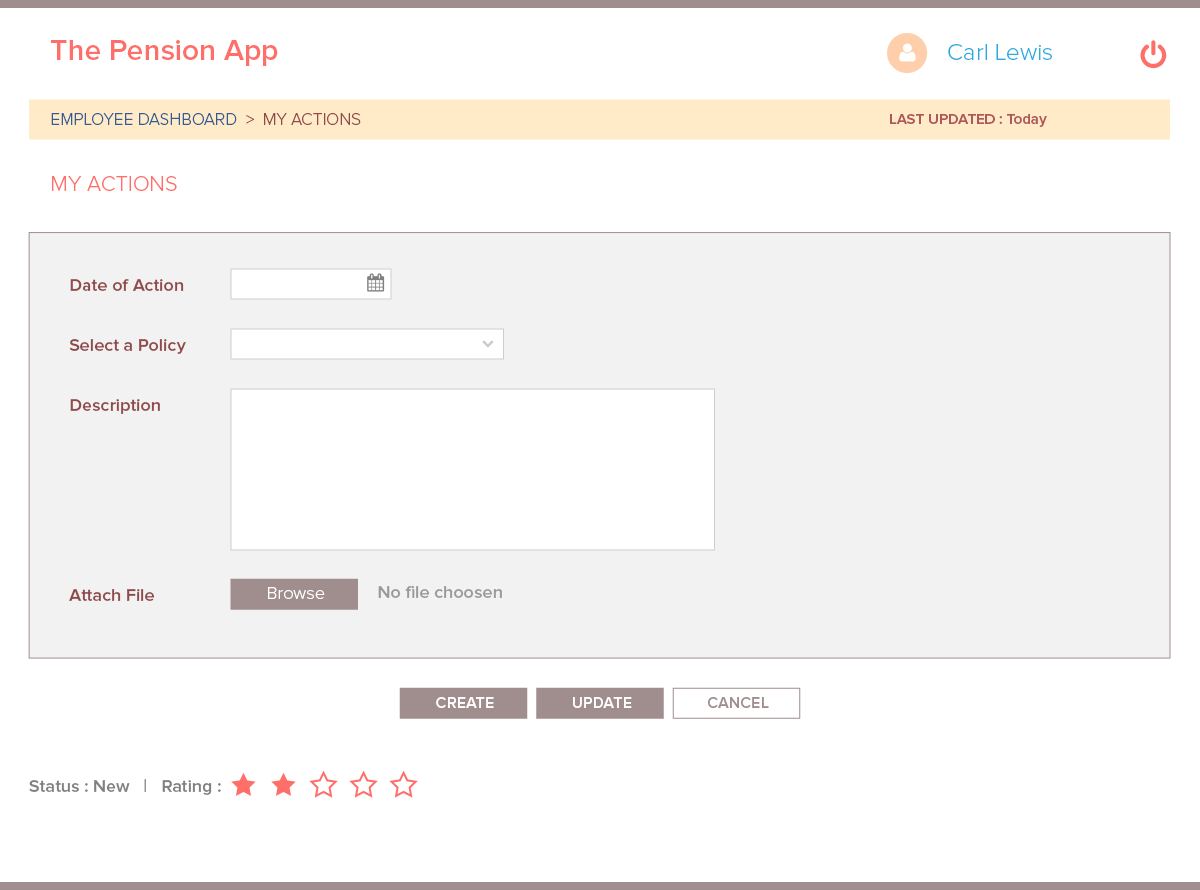
<style>
.page{position:relative;width:1200px;height:890px;background:#ffffff}
.page>*{position:absolute;margin:0}
.t1{font:30px "ProximaNova-Semibold";color:#ff6f69}
.t2{font:24px "ProximaNova-Light";color:#29abe2}
.t3{font:17px "ProximaNova-Light";color:#345b94}
.t4{font:17px "ProximaNova-Light";color:#914a4a}
.t5{font:15px "ProximaNova-Semibold";color:#af5858}
.t6{font:22px "ProximaNova-Light";color:#ff6f69}
.t7{font:18px "ProximaNova-Semibold";color:#914a4a}
.t8{font:18px "ProximaNova-Light";color:#ffffff}
.t9{font:18px "ProximaNova-Semibold";color:#999999}
.t10{font:16px "ProximaNova-Semibold";color:#ffffff}
.t11{font:16px "ProximaNova-Semibold";color:#a08d8d}
.t12{font:18px "ProximaNova-Semibold";color:#808080}
</style>
<div class="page">
<p class="t1" style="left:51px;top:40px;width:227px;height:26px">The Pension App</p>
<p class="t2" style="left:948px;top:44px;width:104px;height:16px">Carl Lewis</p>
<p class="t3" style="left:51px;top:113px;width:310px;height:12px">EMPLOYEE DASHBOARD<span class="t4">  &gt;  MY ACTIONS</span></p>
<p class="t5" style="left:890px;top:114px;width:157px;height:13px">LAST UPDATED : Today</p>
<p class="t6" style="left:52px;top:176px;width:125px;height:15px">MY ACTIONS</p>
<p class="t7" style="left:70px;top:279px;width:114px;height:12px">Date of Action</p>
<p class="t7" style="left:69px;top:339px;width:117px;height:15px">Select a Policy</p>
<p class="t7" style="left:70px;top:399px;width:90px;height:15px">Description</p>
<p class="t7" style="left:69px;top:589px;width:86px;height:12px">Attach File</p>
<p class="t8" style="left:268px;top:587px;width:57px;height:12px">Browse</p>
<p class="t9" style="left:378px;top:585px;width:124px;height:13px">No file choosen</p>
<p class="t10" style="left:436px;top:697px;width:58px;height:11px">CREATE</p>
<p class="t10" style="left:573px;top:697px;width:59px;height:11px">UPDATE</p>
<p class="t11" style="left:708px;top:697px;width:61px;height:11px">CANCEL</p>
<p class="t12" style="left:29px;top:779px;width:192px;height:16px">Status : New   |   Rating :</p>
</div>
